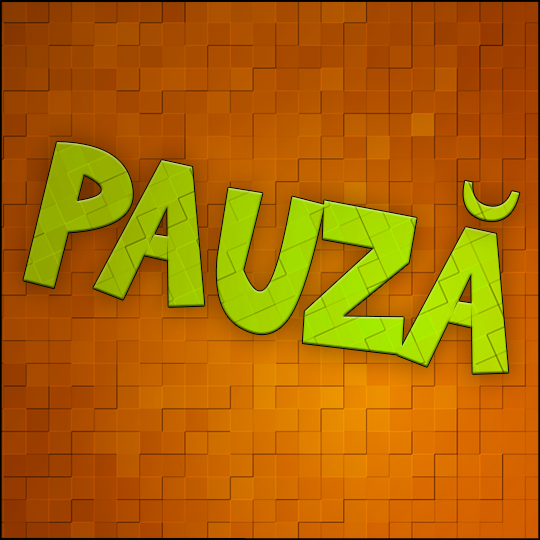
<style>
.page{position:relative;width:540px;height:540px}
.page>*{position:absolute;margin:0}
.t1{font:250px "Brady-Bunch"}
</style>
<div class="page">
<p class="t1" style="left:23px;top:142px;width:486px;height:232px;rotate:12deg">PAUZA</p>
</div>
